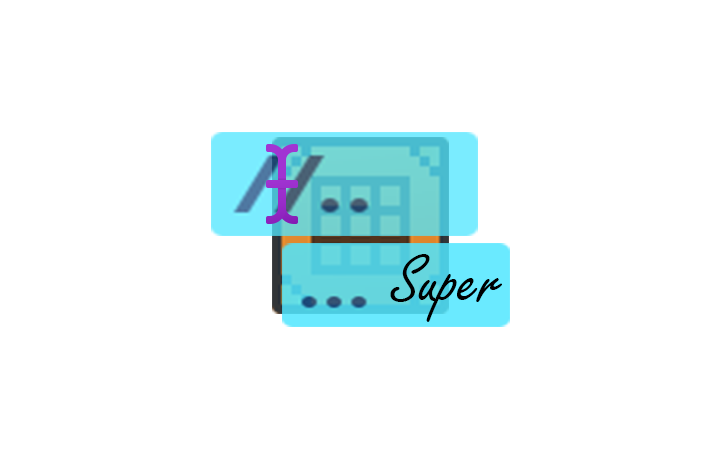
<style>
.page{position:relative;width:720px;height:450px;background:#ffffff}
.page>*{position:absolute;margin:0}
.t1{font:74.4px "FreestyleScript-Regular";color:#000000}
</style>
<div class="page">
<p class="t1" style="left:390px;top:254px;width:112px;height:68px">Super</p>
</div>
